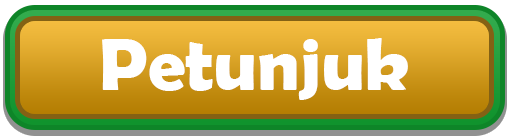
<style>
.page{position:relative;width:510px;height:138px}
.page>*{position:absolute;margin:0}
.t1{font:75px "BerlinSansFBDemi-Bold";color:#ffffff}
</style>
<div class="page">
<p class="t1" style="left:102px;top:38px;width:306px;height:62px">Petunjuk</p>
</div>
